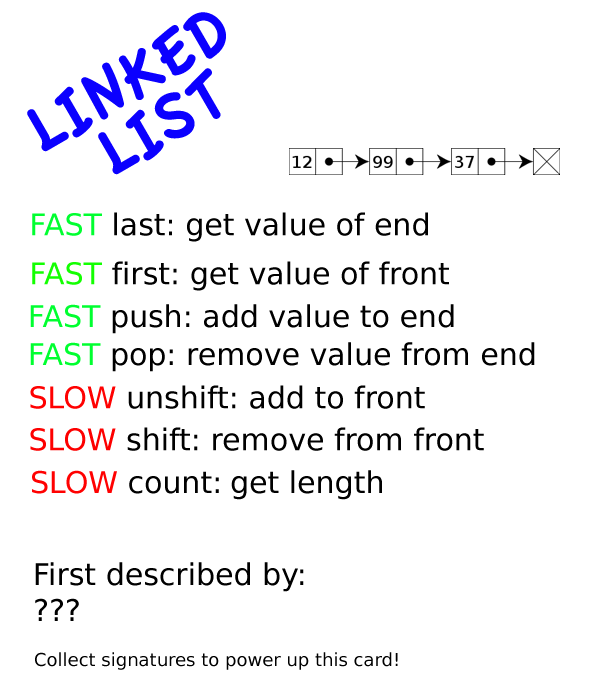
<style>
.page{position:relative;width:600px;height:700px;background:#ffffff}
.page>*{position:absolute;margin:0}
.t1{font:72px "AppleCasual";color:#0c00ff}
.t2{font:30px "BitstreamVeraSans-Roman";color:#000000}
.t3{font:30px "BitstreamVeraSans-Roman";color:#00ff30}
.t4{font:30px "BitstreamVeraSans-Roman";color:#13ff01}
.t5{font:30px "BitstreamVeraSans-Roman";color:#ff0101}
.t6{font:30px "BitstreamVeraSans-Roman";color:#fd0000}
.t7{font:18px "BitstreamVeraSans-Roman";color:#000000}
</style>
<div class="page">
<p class="t1" style="left:27px;top:12px;width:199px;height:140px;rotate:-30deg">LINKED</p>
<p class="t1" style="left:98px;top:68px;width:123px;height:107px;rotate:-30deg">LIST</p>
<p class="t2" style="left:32px;top:212px;width:396px;height:30px"><span class="t3">FAST </span>last: get value of end</p>
<p class="t2" style="left:32px;top:261px;width:417px;height:30px"><span class="t4">FAST </span>first: get value of front</p>
<p class="t2" style="left:30px;top:304px;width:424px;height:30px"><span class="t3">FAST </span>push: add value to end</p>
<p class="t2" style="left:30px;top:342px;width:505px;height:30px"><span class="t3">FAST </span>pop: remove value from end</p>
<p class="t2" style="left:30px;top:385px;width:395px;height:24px"><span class="t5">SLOW </span>unshift: add to front</p>
<p class="t2" style="left:30px;top:427px;width:454px;height:24px"><span class="t6">SLOW </span>shift: remove from front</p>
<p class="t2" style="left:32px;top:470px;width:350px;height:30px"><span class="t5">SLOW </span>count: get length</p>
<p class="t2" style="left:35px;top:562px;width:269px;height:59px">First described by:<br>???</p>
<p class="t7" style="left:35px;top:652px;width:363px;height:18px">Collect signatures to power up this card!</p>
</div>
